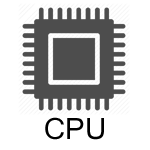
<style>
.page{position:relative;width:150px;height:150px;background:#ffffff}
.page>*{position:absolute;margin:0}
.t1{font:29.3px "MicrosoftSansSerif";color:#000000}
</style>
<div class="page">
<p class="t1" style="left:45px;top:117px;width:59px;height:23px">CPU</p>
</div>
